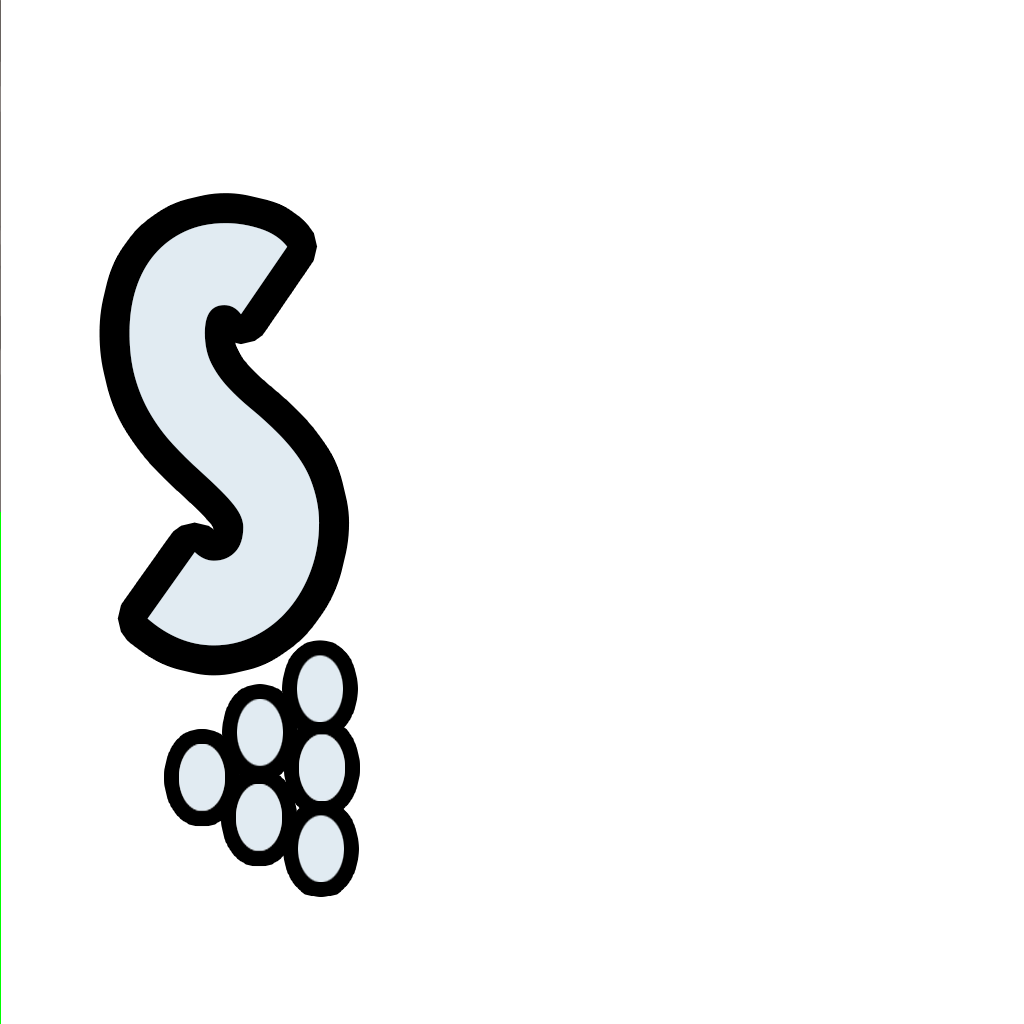
<style>
.page{position:relative;width:1024px;height:1024px;background:#ffffff}
.page>*{position:absolute;margin:0}
.t1{font:535.5px "MailRayStuff-Regular";color:#e1ebf2;scale:0.89 1}
</style>
<div class="page">
<p class="t1" style="left:129px;top:223px;width:191px;height:423px">S</p>
</div>
